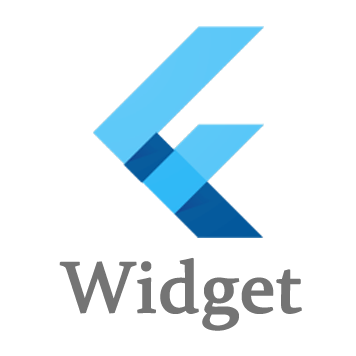
<style>
.page{position:relative;width:356px;height:356px;background:#ffffff}
.page>*{position:absolute;margin:0}
.t1{font:72px "Constantia";color:#747474;font-weight:bold}
</style>
<div class="page">
<p class="t1" style="left:59px;top:257px;width:243px;height:74px">Widget</p>
</div>
